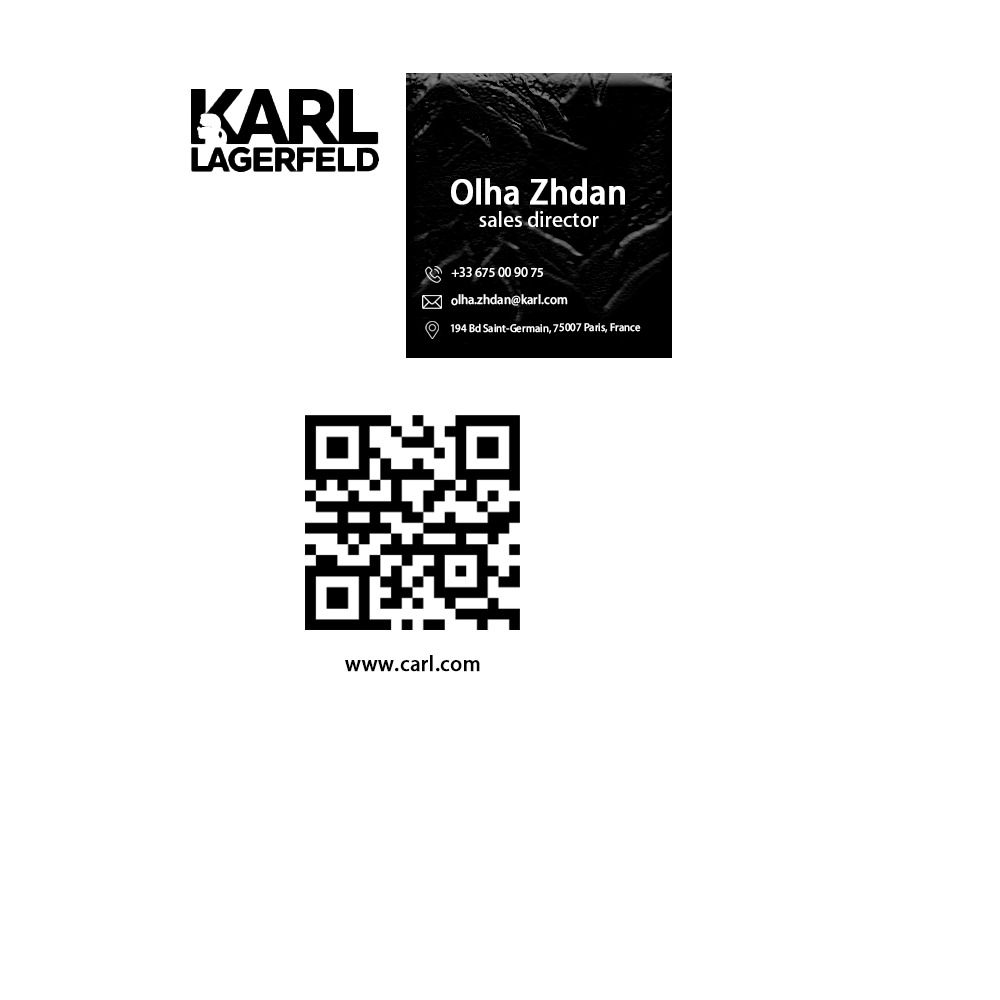
<style>
.page{position:relative;width:1000px;height:1000px;background:#ffffff}
.page>*{position:absolute;margin:0}
.t1{font:32px "AdobeHeitiStd-Regular";color:#ffffff;font-weight:bold}
.t2{font:20px "AdobeHeitiStd-Regular";color:#ffffff}
.t3{font:12px "AdobeHeitiStd-Regular";color:#ffffff}
.t4{font:10px "AdobeHeitiStd-Regular";color:#ffffff}
.t5{font:20px "AdobeHeitiStd-Regular";color:#010100;font-weight:bold}
</style>
<div class="page">
<p class="t1" style="left:451px;top:178px;width:174px;height:27px">Olha Zhdan</p>
<p class="t2" style="left:479px;top:211px;width:120px;height:16px">sales director</p>
<p class="t3" style="left:451px;top:267px;width:92px;height:10px">+33 675 00 90 75</p>
<p class="t3" style="left:451px;top:294px;width:117px;height:12px">olha.zhdan@karl.com</p>
<p class="t4" style="left:450px;top:323px;width:191px;height:11px">194 Bd Saint-Germain, 75007 Paris, France</p>
<p class="t5" style="left:345px;top:655px;width:135px;height:17px">www.carl.com</p>
</div>
